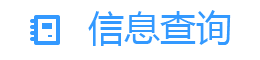
<style>
.page{position:relative;width:260px;height:60px;background:#ffffff}
.page>*{position:absolute;margin:0}
.t1{font:36px "MicrosoftYaHei";color:#3399ff}
</style>
<div class="page">
<p class="t1" style="left:88px;top:10px;width:143px;height:36px">信息查询</p>
</div>
